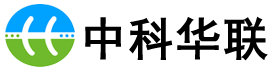
<style>
.page{position:relative;width:276px;height:75px;background:#ffffff}
.page>*{position:absolute;margin:0}
.t1{font:45.3px "SimHei";letter-spacing:0.02em;color:#000000;text-transform:uppercase;font-weight:bold}
</style>
<div class="page">
<p class="t1" style="left:85px;top:16px;width:183px;height:45px">中科华联</p>
</div>
